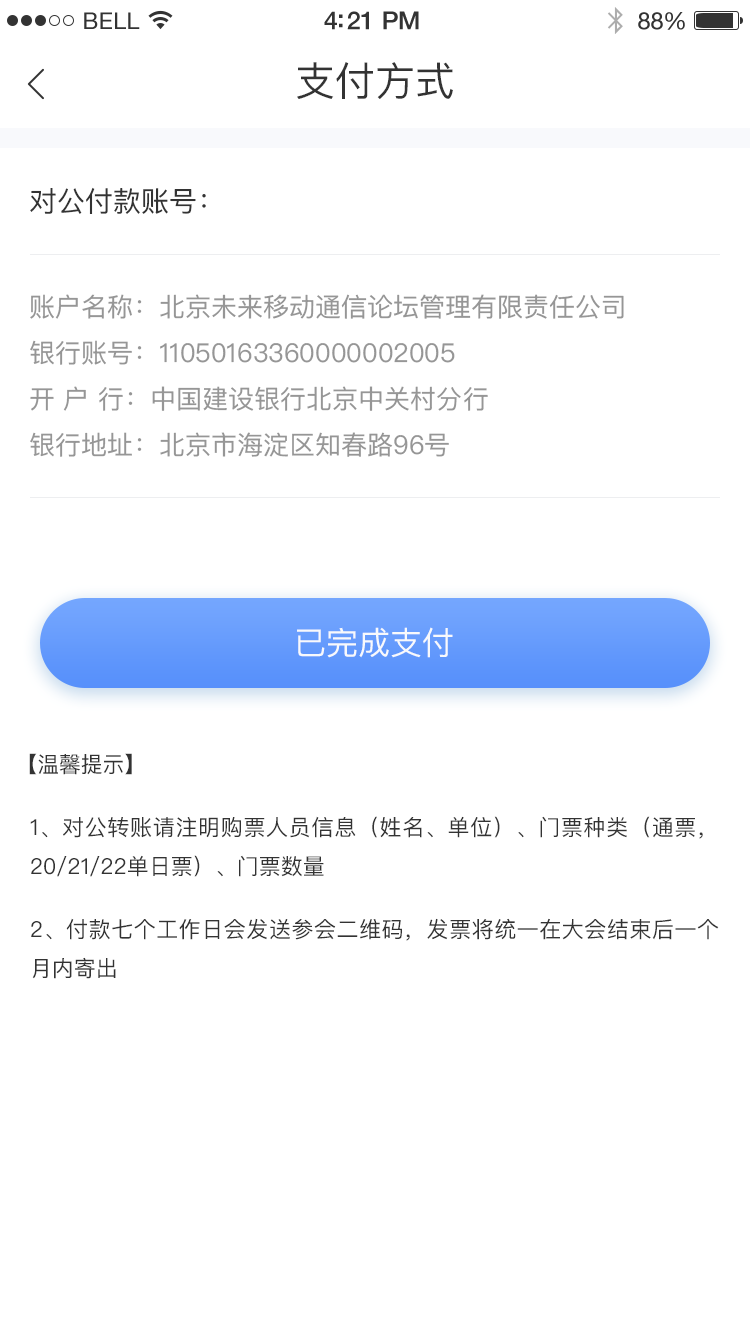
<style>
.page{position:relative;width:750px;height:1334px;background:#ffffff}
.page>*{position:absolute;margin:0}
.t1{font:23px "HelveticaNeue";letter-spacing:0.02em;color:#333333}
.t2{font:25px "HelveticaNeue-Medium";letter-spacing:-0.02em;color:#333333}
.t3{font:24px "HelveticaNeue";letter-spacing:-0.02em;color:#333333}
.t4{font:40px "PingFangSC-Regular";color:#333333}
.t5{font:27.9px "PingFangSC-Regular";color:#333333}
.t6{font:26px/36px "PingFangSC-Regular";color:#969696}
.t7{font:32px "PingFangSC-Regular";color:#f8f9fc}
.t8{font:22px "PingFangSC-Regular";color:#333333;text-transform:uppercase}
.t9{font:22px/39px "PingFangSC-Regular";color:#333333;text-transform:uppercase}
</style>
<div class="page">
<p class="t1" style="left:84px;top:12px;width:56px;height:17px">BELL</p>
<p class="t2" style="left:324px;top:11px;width:95px;height:19px">4:21 PM</p>
<p class="t3" style="left:638px;top:12px;width:47px;height:18px">88%</p>
<p class="t4" style="left:297px;top:62px;width:156px;height:37px">支付方式</p>
<p class="t5" style="left:30px;top:187px;width:176px;height:27px">对公付款账号：</p>
<p class="t6" style="left:30px;top:294px;width:594px;height:163px">账户名称：北京未来移动通信论坛管理有限责任公司<br>银行账号：11050163360000002005<br>开 户 行：中国建设银行北京中关村分行<br>银行地址：北京市海淀区知春路96号</p>
<p class="t7" style="left:297px;top:627px;width:156px;height:31px">已完成支付</p>
<p class="t8" style="left:29px;top:753px;width:103px;height:22px">【温馨提示】</p>
<p class="t9" style="left:30px;top:816px;width:689px;height:163px;text-align:justify">1、对公转账请注明购票人员信息（姓名、单位）、门票种类（通票，20/21/22单日票）、门票数量<br>2、付款七个工作日会发送参会二维码，发票将统一在大会结束后一个月内寄出</p>
</div>
